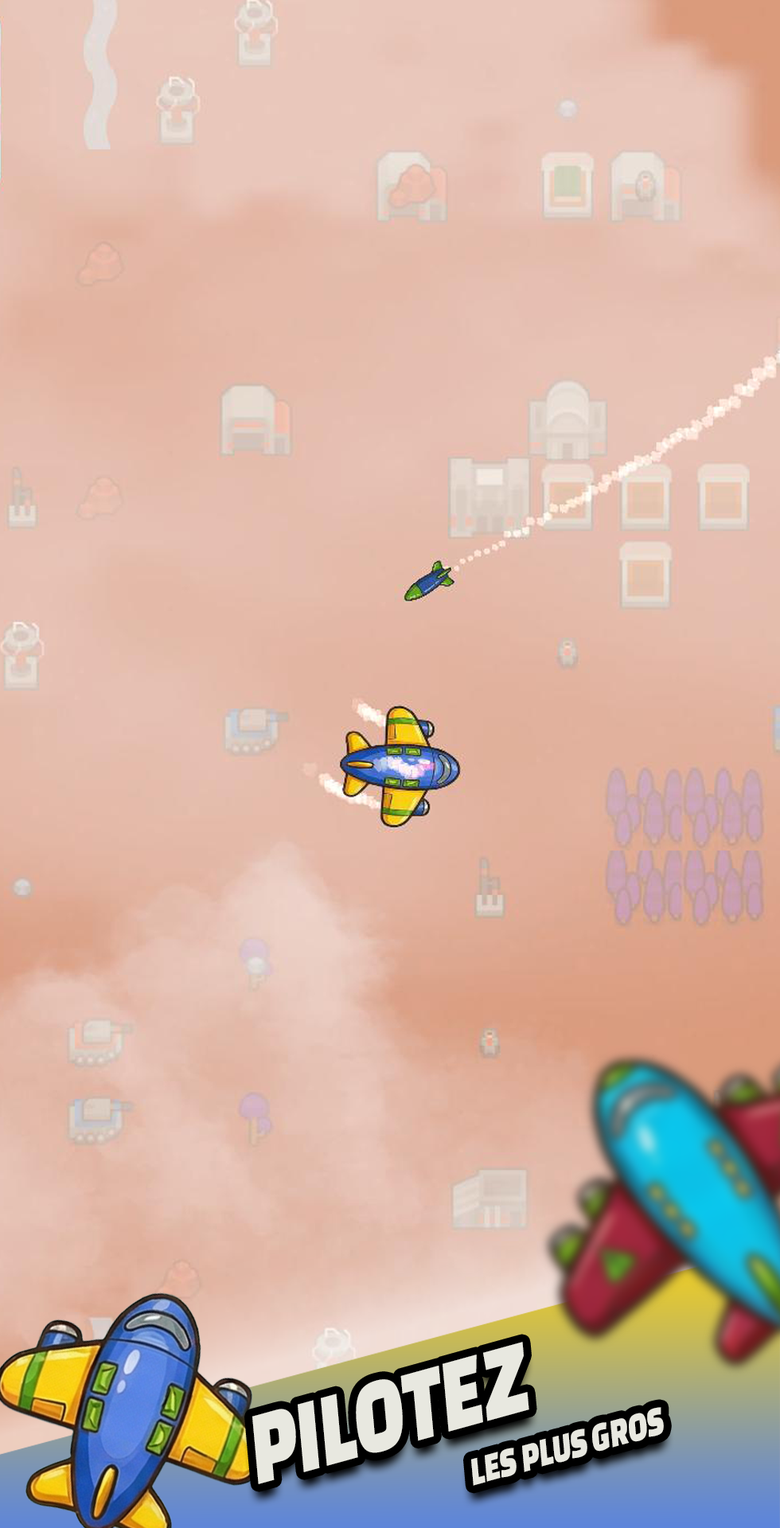
<style>
.page{position:relative;width:780px;height:1528px}
.page>*{position:absolute;margin:0}
.t1{font:108.4px "ChangaOne";color:#e8e8e0;scale:0.74 1}
.t2{font:41.8px "ChangaOne";color:#e8e8e0;scale:0.74 1}
</style>
<div class="page">
<p class="t1" style="left:252px;top:1342px;width:277px;height:143px;rotate:-15deg">PILOTEZ</p>
<p class="t2" style="left:471px;top:1407px;width:193px;height:79px;rotate:-15deg">LES PLUS GROS</p>
</div>
